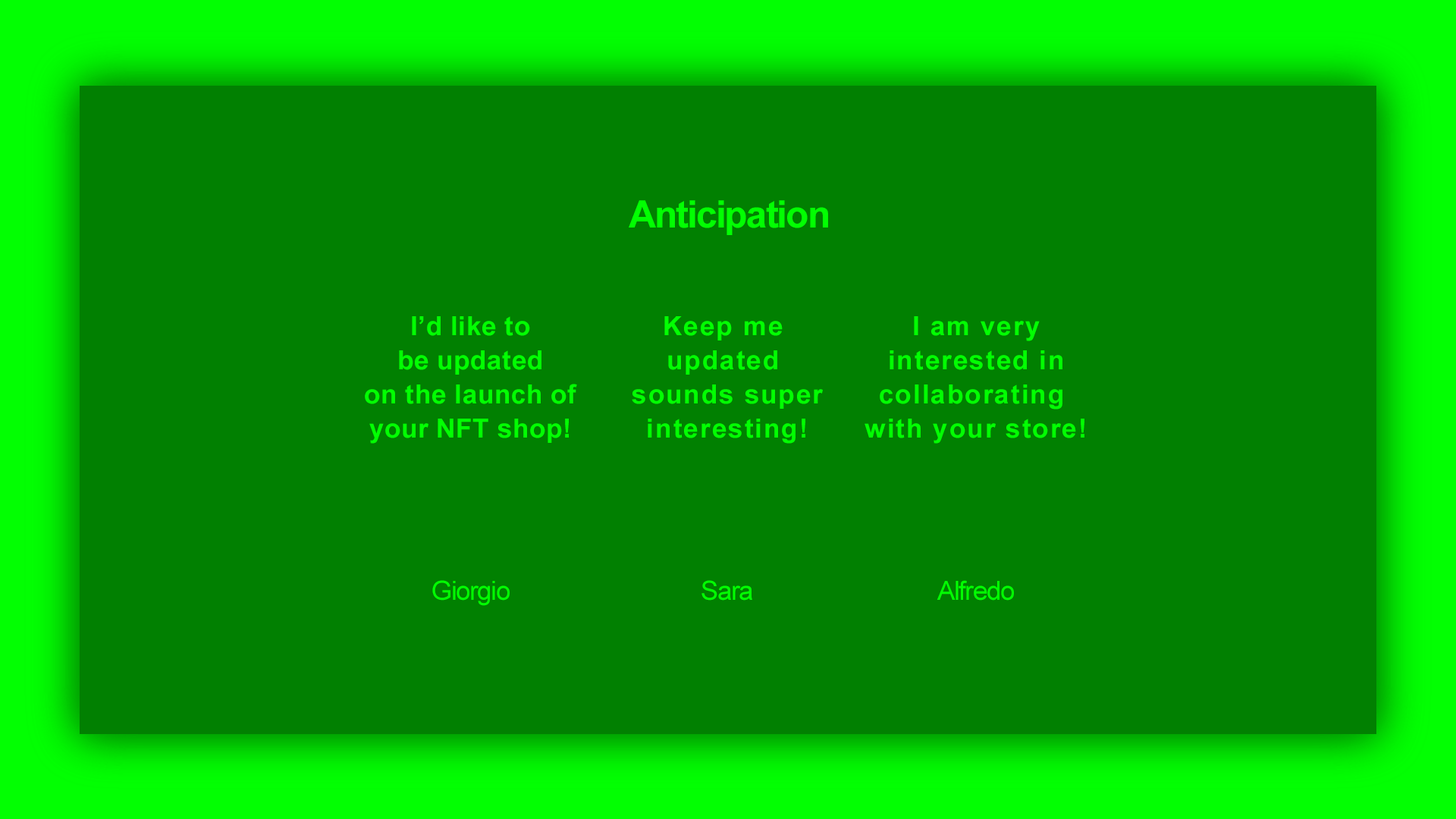
<style>
.page{position:relative;width:1456px;height:819px;background:#018001}
.page>*{position:absolute;margin:0}
.t1{font:37.9px "Arial-BoldMT";letter-spacing:-0.04em;color:#02ff02}
.t2{font:26.5px/34.2px "Arial-BoldMT";letter-spacing:0.02em;color:#02ff02}
.t3{font:26.5px/34.2px "Arial-BoldMT";letter-spacing:0.06em;color:#02ff02}
.t4{font:26.5px "ArialMT";letter-spacing:-0.04em;color:#02ff02}
</style>
<div class="page">
<p class="t1" style="left:629px;top:200px;width:199px;height:35px">Anticipation</p>
<p class="t2" style="left:365px;top:316px;width:212px;height:128px;text-align:center">I’d like to<br>be updated<br>on the launch of<br>your NFT shop!</p>
<p class="t3" style="left:632px;top:316px;width:191px;height:128px;text-align:center">Keep me <br>updated <br>sounds super<br>interesting!</p>
<p class="t3" style="left:864px;top:316px;width:220px;height:128px;text-align:center">I am very<br>interested in<br>collaborating <br>with your store!</p>
<p class="t4" style="left:432px;top:580px;width:78px;height:26px">Giorgio</p>
<p class="t4" style="left:701px;top:580px;width:51px;height:21px">Sara</p>
<p class="t4" style="left:937px;top:580px;width:77px;height:21px">Alfredo</p>
</div>
